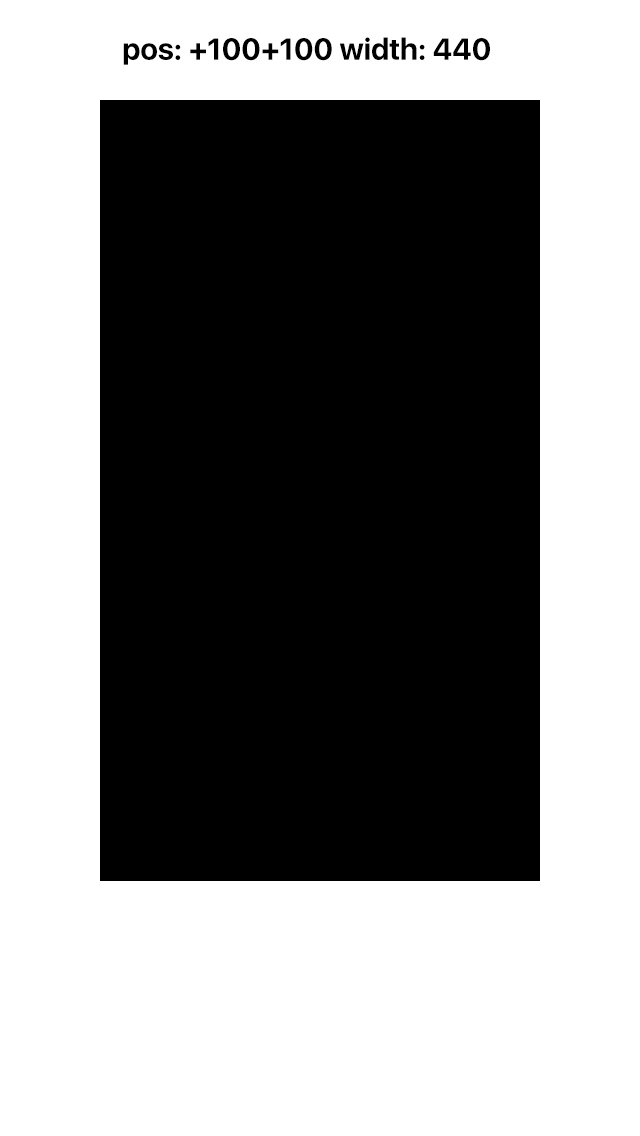
<style>
.page{position:relative;width:640px;height:1136px;background:#ffffff}
.page>*{position:absolute;margin:0}
.t1{font:30px "SFUIDisplay-Bold";color:#000000}
</style>
<div class="page">
<p class="t1" style="left:123px;top:37px;width:367px;height:28px">pos: +100+100 width: 440</p>
</div>
